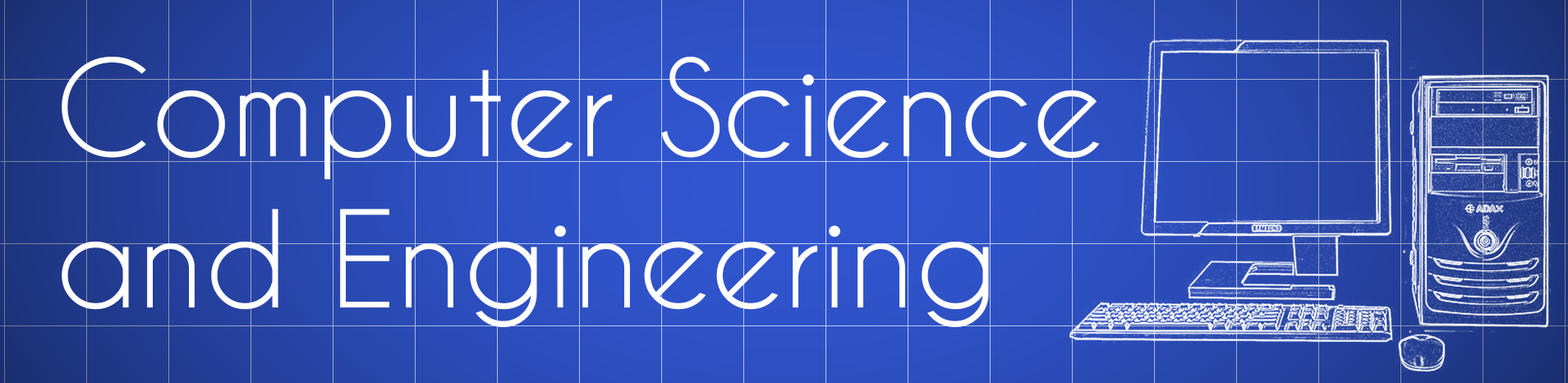
<style>
.page{position:relative;width:1568px;height:383px}
.page>*{position:absolute;margin:0}
.t1{font:125.9px "CaviarDreams";color:#ffffff}
</style>
<div class="page">
<p class="t1" style="left:62px;top:57px;width:1038px;height:270px">Computer Science<br>and Engineering</p>
</div>
